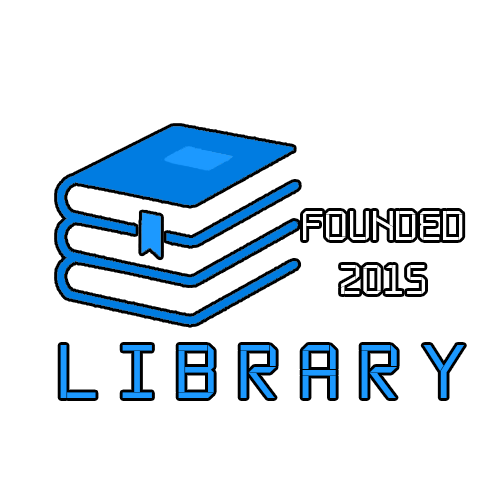
<style>
.page{position:relative;width:500px;height:500px;background:#ffffff}
.page>*{position:absolute;margin:0}
.t1{font:41px "ApertureRegular";color:#ffffff}
.t2{font:41.7px "ApertureRegular";color:#ffffff}
.t3{font:75px "ApertureRegular";color:#1c99ff}
</style>
<div class="page">
<p class="t1" style="left:303px;top:211px;width:160px;height:29px">FOUNDED</p>
<p class="t2" style="left:341px;top:265px;width:84px;height:29px">2015</p>
<p class="t3" style="left:60px;top:345px;width:404px;height:53px">L I B R A R Y</p>
</div>
